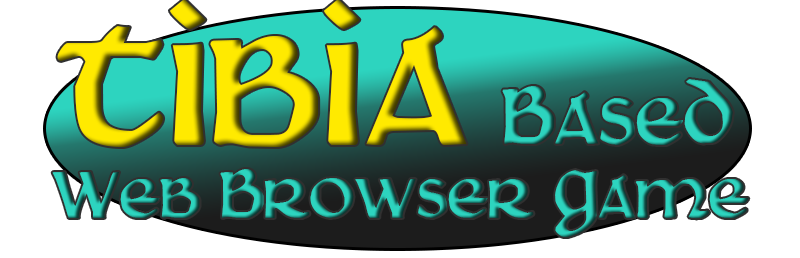
<style>
.page{position:relative;width:800px;height:258px;background:#ffffff}
.page>*{position:absolute;margin:0}
.t1{font:221.5px "Martel"}
.t2{font:96px "Martel"}
.t3{font:80px "Martel"}
</style>
<div class="page">
<p class="t1" style="left:57px;top:0px;width:410px;height:147px">tibia</p>
<p class="t2" style="left:502px;top:79px;width:231px;height:66px">Based</p>
<p class="t3" style="left:52px;top:169px;width:697px;height:68px">Web Browser Game</p>
</div>
